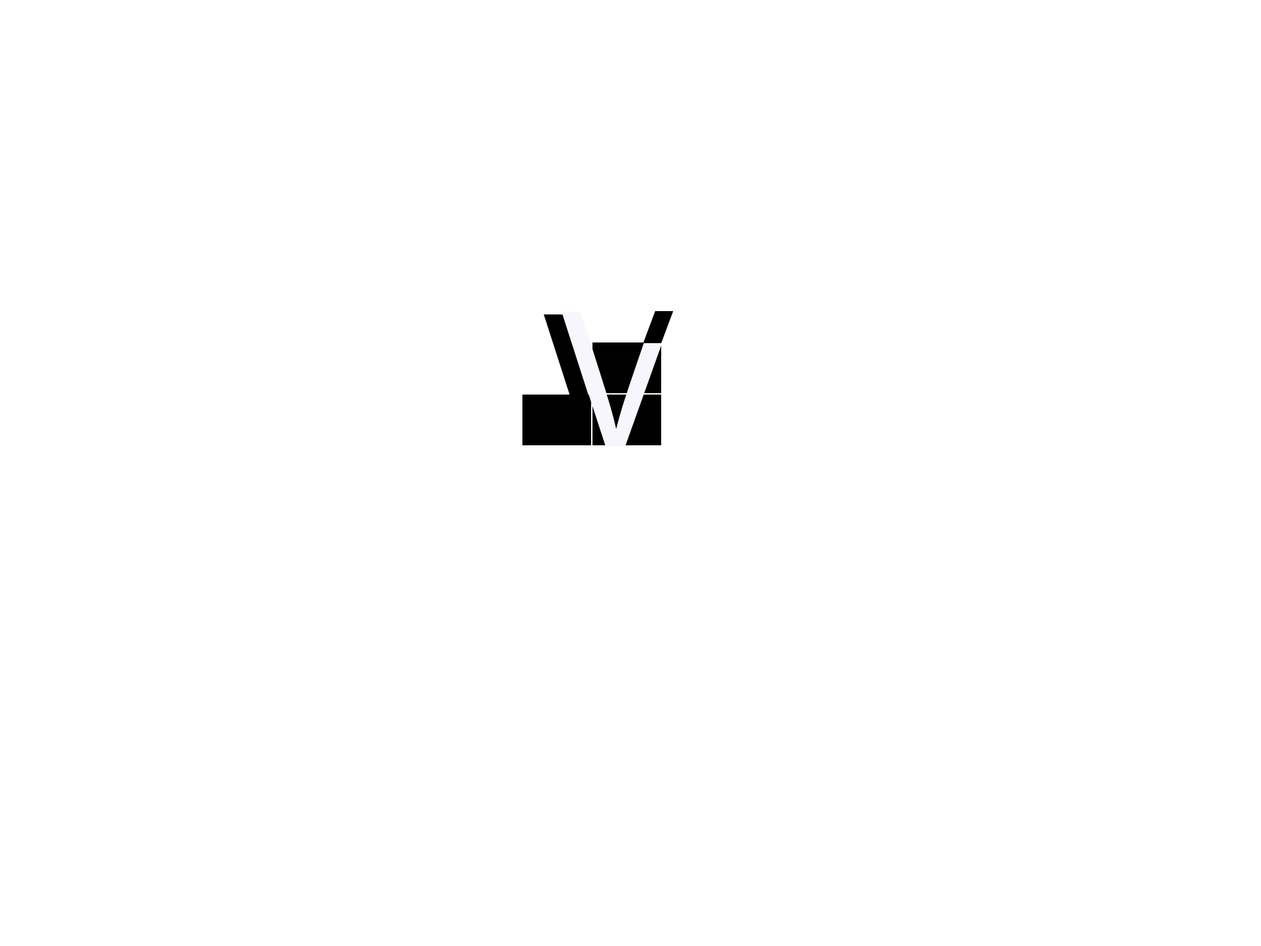
<style>
.page{position:relative;width:1261px;height:946px;background:#ffffff}
.page>*{position:absolute;margin:0}
.t1{font:200.2px "MyriadPro-Regular";color:#f7f6fc}
</style>
<div class="page">
<p class="t1" style="left:562px;top:312px;width:111px;height:134px">V</p>
</div>
